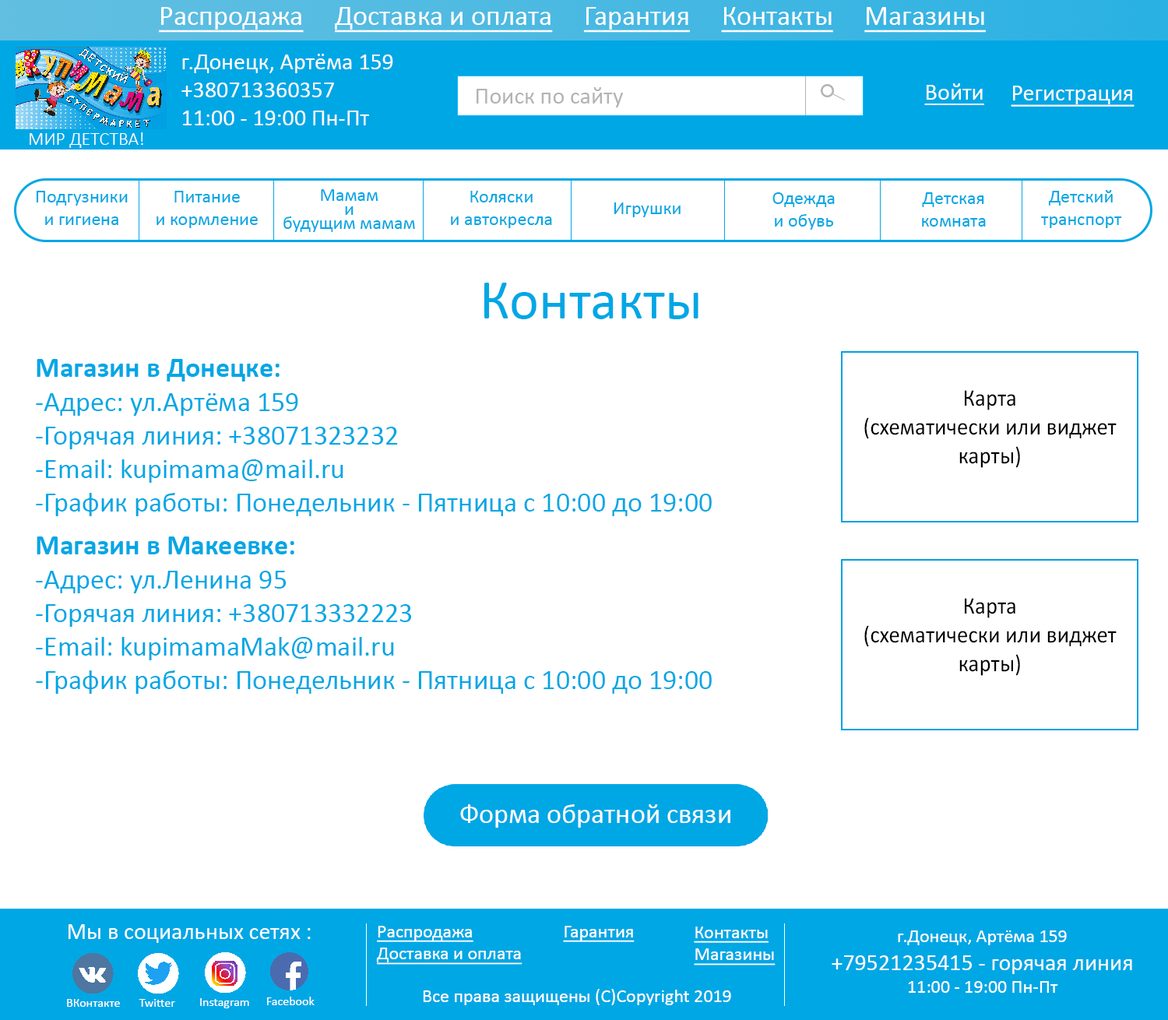
<style>
.page{position:relative;width:1168px;height:1020px;background:#ffffff}
.page>*{position:absolute;margin:0}
.t1{font:28px "Calibri";color:#ffffff;text-decoration:underline}
.t2{font:23.4px "Calibri";color:#ffffff}
.t3{font:23.4px "Calibri";color:#b3b3b3}
.t4{font:23.4px "Calibri";color:#ffffff;text-decoration:underline}
.t5{font:18.7px "Calibri-Light";color:#ffffff}
.t6{font:18.7px "Calibri";color:#00a7e5}
.t7{font:18.7px/14px "Calibri";color:#00a7e5}
.t8{font:56.1px "Calibri";color:#00a7e5}
.t9{font:28px "Calibri";color:#00a7e5}
.t10{font:28px "Calibri-Bold";color:#00a7e5}
.t11{font:23.9px "Calibri";color:#000000;scale:0.94 1}
.t12{font:28px "Calibri";color:#ffffff}
.t13{font:18.7px "Calibri";color:#ffffff;text-decoration:underline}
.t14{font:18.7px "Calibri";color:#ffffff}
.t15{font:12.5px "Calibri";color:#ffffff}
</style>
<div class="page">
<p class="t1" style="left:159px;top:7px;width:827px;height:26px">Распродажа     Доставка и оплата     Гарантия     Контакты     Магазины</p>
<p class="t2" style="left:182px;top:54px;width:211px;height:71px">г.Донецк, Артёма 159<br>+380713360357<br>11:00 - 19:00 Пн-Пт</p>
<p class="t3" style="left:477px;top:87px;width:146px;height:21px">Поиск по сайту</p>
<p class="t4" style="left:925px;top:83px;width:60px;height:22px">Войти</p>
<p class="t4" style="left:1011px;top:86px;width:124px;height:21px">Регистрация</p>
<p class="t5" style="left:30px;top:132px;width:113px;height:16px">МИР ДЕТСТВА!</p>
<p class="t6" style="left:36px;top:191px;width:92px;height:34px;text-align:center">Подгузники<br>и гигиена</p>
<p class="t6" style="left:157px;top:191px;width:101px;height:37px;text-align:center">Питание <br>и кормление</p>
<p class="t7" style="left:284px;top:189px;width:131px;height:43px;text-align:center">Мамам<br>и <br>будущим мамам</p>
<p class="t6" style="left:451px;top:191px;width:101px;height:37px;text-align:center">Коляски<br>и автокресла</p>
<p class="t6" style="left:773px;top:192px;width:62px;height:38px;text-align:center">Одежда<br>и обувь</p>
<p class="t6" style="left:922px;top:192px;width:64px;height:35px;text-align:center">Детская<br>комната</p>
<p class="t6" style="left:1042px;top:190px;width:81px;height:38px;text-align:center">Детский<br>транспорт</p>
<p class="t6" style="left:614px;top:203px;width:67px;height:14px">Игрушки</p>
<p class="t8" style="left:485px;top:283px;width:214px;height:36px">Контакты</p>
<p class="t9" style="left:36px;top:359px;width:676px;height:157px"><span class="t10">Магазин в Донецке:<br></span>-Адрес: ул.Артёма 159<br>-Горячая линия: +38071323232<br>-Email: kupimama@mail.ru<br>-График работы: Понедельник - Пятница с 10:00 до 19:00</p>
<p class="t11" style="left:865px;top:390px;width:252px;height:78px;text-align:center">Карта<br>(схематически или виджет карты)</p>
<p class="t9" style="left:36px;top:537px;width:676px;height:157px"><span class="t10">Магазин в Макеевке:<br></span>-Адрес: ул.Ленина 95<br>-Горячая линия: +380713332223<br>-Email: kupimamaMak@mail.ru<br>-График работы: Понедельник - Пятница с 10:00 до 19:00</p>
<p class="t11" style="left:865px;top:598px;width:252px;height:78px;text-align:center">Карта<br>(схематически или виджет карты)</p>
<p class="t12" style="left:460px;top:805px;width:271px;height:23px">Форма обратной связи</p>
<p class="t2" style="left:69px;top:925px;width:242px;height:18px">Мы в социальных сетях :</p>
<p class="t13" style="left:376px;top:926px;width:147px;height:39px">Распродажа<br>Доставка и оплата</p>
<p class="t13" style="left:563px;top:926px;width:72px;height:17px">Гарантия</p>
<p class="t13" style="left:694px;top:927px;width:82px;height:39px">Контакты<br>Магазины</p>
<p class="t2" style="left:832px;top:931px;width:301px;height:62px;text-align:center"><span class="t14">г.Донецк, Артёма 159<br></span>+79521235415 - горячая линия<br><span class="t14">11:00 - 19:00 Пн-Пт</span></p>
<p class="t14" style="left:423px;top:989px;width:308px;height:17px">Все права защищены (С)Copyright 2019</p>
<p class="t15" style="left:67px;top:999px;width:53px;height:8px">ВКонтакте</p>
<p class="t15" style="left:139px;top:999px;width:36px;height:8px">Twitter</p>
<p class="t15" style="left:200px;top:999px;width:49px;height:10px">Instagram</p>
<p class="t15" style="left:267px;top:997px;width:48px;height:9px">Facebook</p>
</div>
